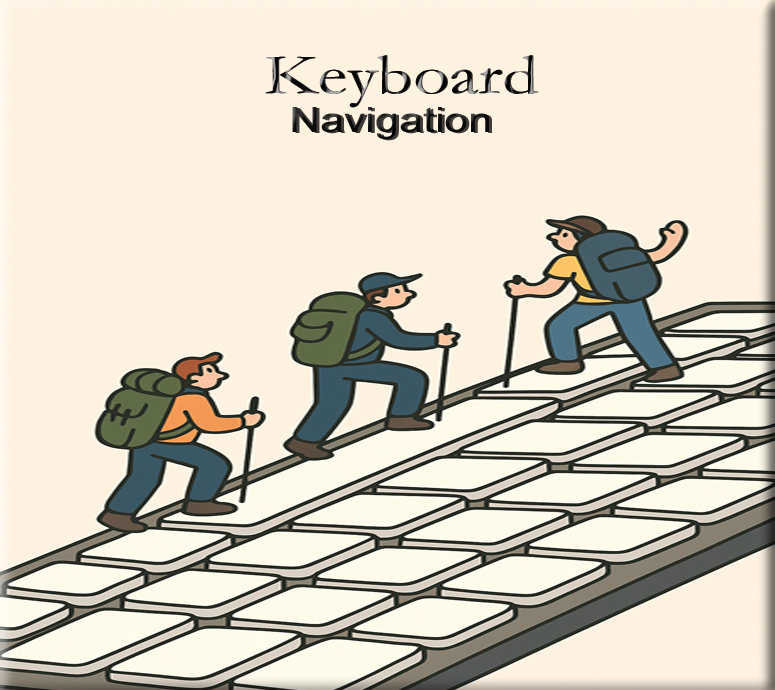
<style>
.page{position:relative;width:775px;height:690px;background:#fff2e0}
.page>*{position:absolute;margin:0}
.t1{font:57.7px "Garamond";color:#0b0b0b;scale:1.24 1}
.t2{font:34.7px "ArialMT";color:#0b0b0b;scale:1.24 1}
</style>
<div class="page">
<p class="t1" style="left:265px;top:55px;width:273px;height:53px">Keyboard</p>
<p class="t2" style="left:292px;top:107px;width:197px;height:33px">Navigation</p>
</div>
